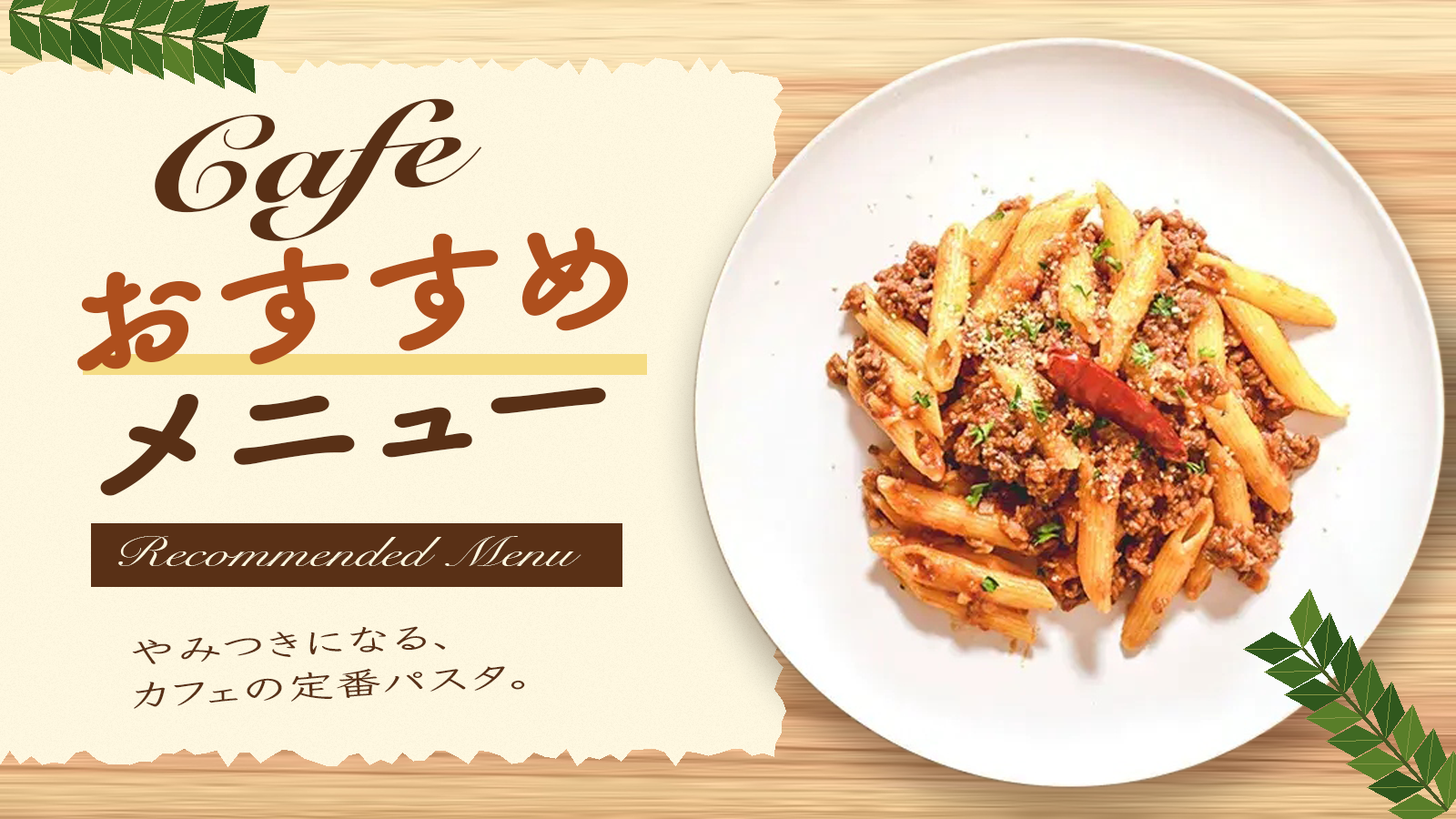
<style>
.page{position:relative;width:1456px;height:819px}
.page>*{position:absolute;margin:0}
.t1{font:122.8px "SnellRoundhand-Black";color:#593016;scale:1.35 1}
.t2{font:131.9px "TsukuBRdGothic-Bold";color:#ae4f1d;font-weight:bold;scale:1.15 1}
.t3{font:127.4px "TsukuBRdGothic-Bold";color:#593016;font-weight:bold;scale:1.22 1}
.t4{font:41.9px "SnellRoundhand";color:#fff7df;scale:1.41 1}
.t5{font:31.8px/43.3px "Klee-Demibold";color:#593016;scale:1.5 1}
</style>
<div class="page">
<p class="t1" style="left:155px;top:98px;width:327px;height:143px;rotate:-6deg">Cafe</p>
<p class="t2" style="left:77px;top:227px;width:552px;height:144px;rotate:-5deg">おすすめ</p>
<p class="t3" style="left:100px;top:387px;width:506px;height:109px;rotate:-5deg">メニュー</p>
<p class="t4" style="left:118px;top:536px;width:463px;height:30px">Recommended Menu</p>
<p class="t5" style="left:132px;top:626px;width:393px;height:83px;rotate:-3deg">やみつきになる、<br>カフェの定番パスタ。</p>
</div>
